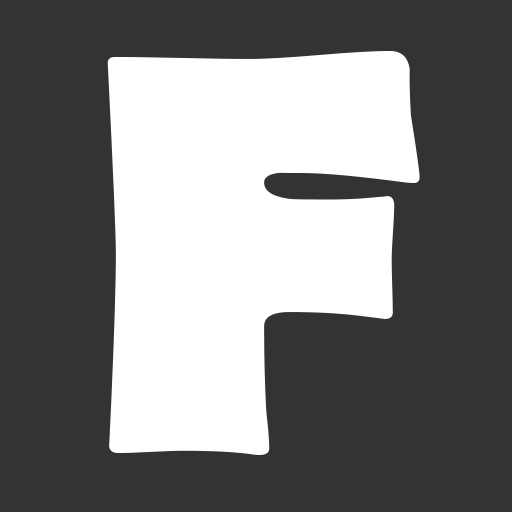
<style>
.page{position:relative;width:512px;height:512px;background:#333333}
.page>*{position:absolute;margin:0}
.t1{font:578.5px "BerlinSansFB-Bold";color:#ffffff}
</style>
<div class="page">
<p class="t1" style="left:107px;top:51px;width:313px;height:404px">F</p>
</div>
